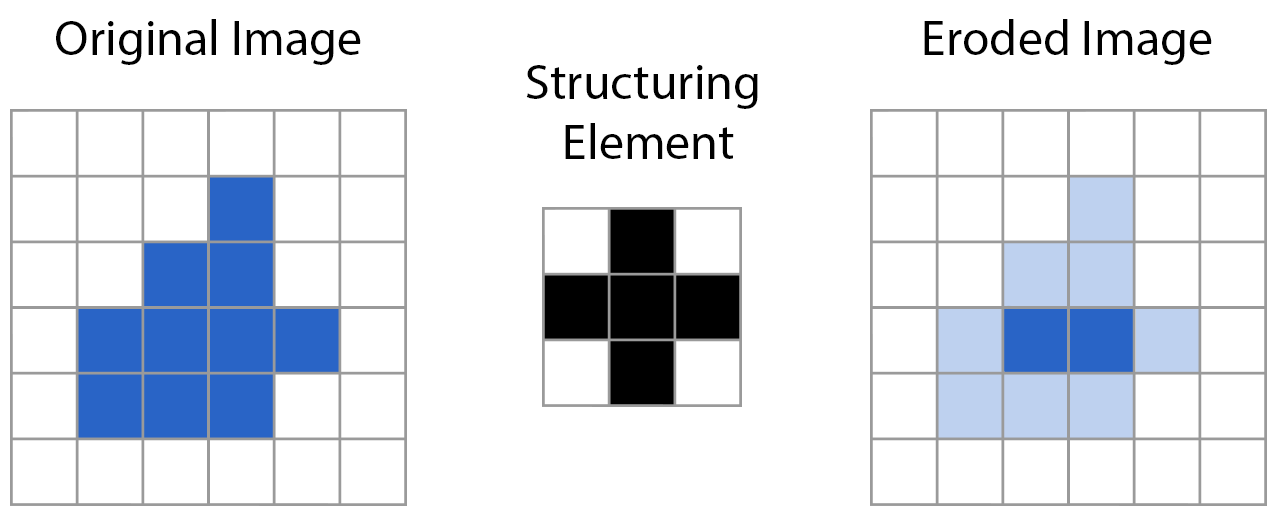
<style>
.page{position:relative;width:1282px;height:521px;background:#ffffff}
.page>*{position:absolute;margin:0}
.t1{font:12px "MyriadPro-Regular";color:#000000}
</style>
<div class="page">
<p class="t1" style="left:56px;top:19px;width:305px;height:46px">Original Image</p>
<p class="t1" style="left:924px;top:19px;width:288px;height:46px">Eroded Image</p>
<p class="t1" style="left:526px;top:65px;width:232px;height:94px;text-align:center">Structuring <br>Element</p>
</div>
